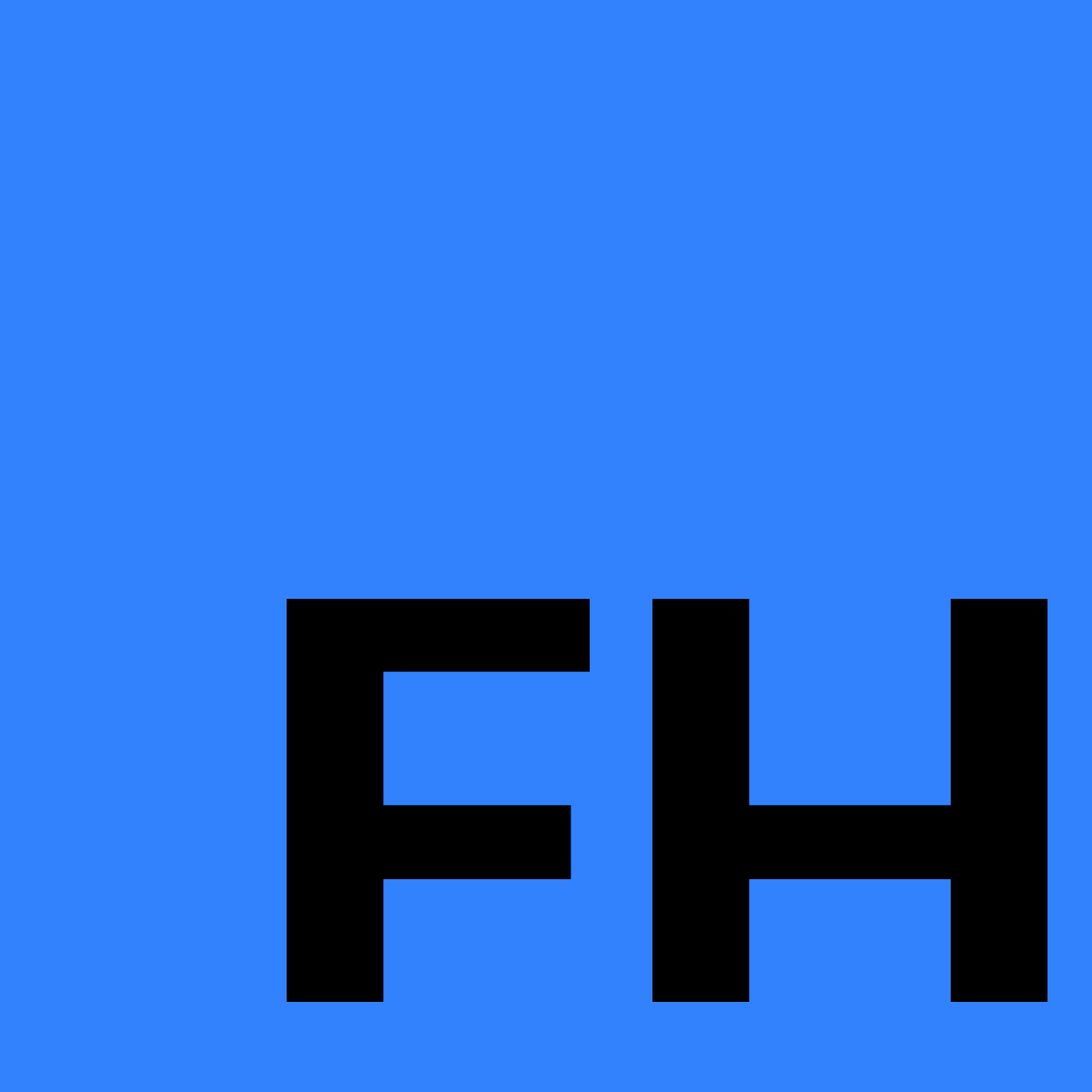
<style>
.page{position:relative;width:1092px;height:1092px;background:#3282fe}
.page>*{position:absolute;margin:0}
.t1{font:592.7px "NeutraText-Bold";letter-spacing:-0.027em;color:#000000;scale:1.17 1}
</style>
<div class="page">
<p class="t1" style="left:286px;top:599px;width:762px;height:403px">FH</p>
</div>
